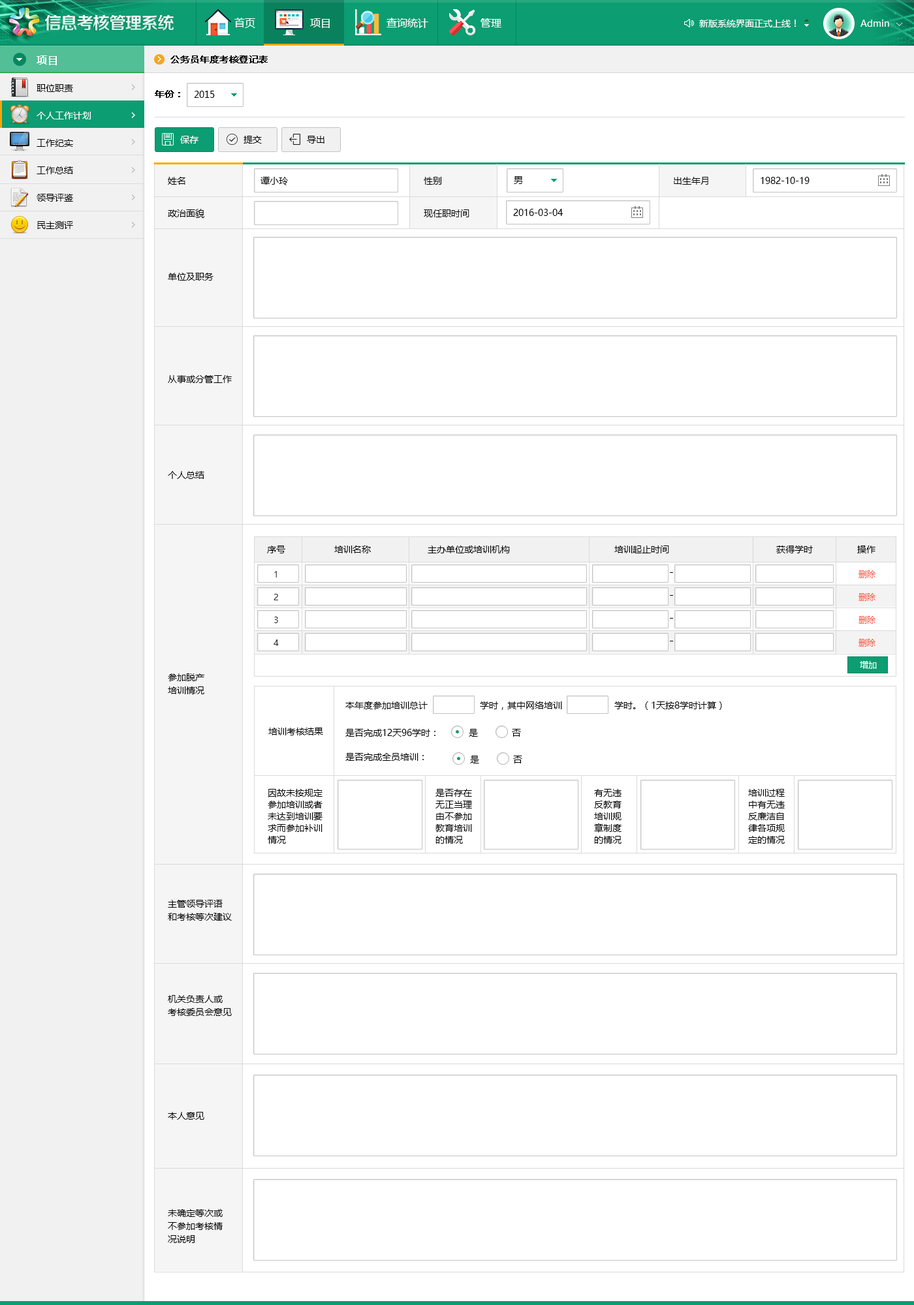
<style>
.page{position:relative;width:914px;height:1305px;background:#ffffff}
.page>*{position:absolute;margin:0}
.t1{font:9.1px "MicrosoftYaHei";color:#000000;font-weight:bold}
.t2{font:9.1px "MicrosoftYaHei";color:#000000}
.t3{font:9.1px "MicrosoftYaHei";color:#ffffff}
.t4{font:9.1px/32.6px "MicrosoftYaHei";color:#000000}
.t5{font:8.5px/22.8px "MicrosoftYaHei";color:#2c2c2c}
.t6{font:8.5px/22.8px "MicrosoftYaHei";color:#f9614d}
.t7{font:8.5px "MicrosoftYaHei";color:#ffffff}
.t8{font:9.1px/13.1px "MicrosoftYaHei";color:#000000}
.t9{font:9.1px/11.7px "MicrosoftYaHei";color:#000000}
</style>
<div class="page">
<p class="t1" style="left:170px;top:55px;width:98px;height:8px">公务员年度考核登记表</p>
<p class="t1" style="left:155px;top:90px;width:25px;height:8px">年份：</p>
<p class="t2" style="left:194px;top:91px;width:21px;height:7px">2015</p>
<p class="t3" style="left:180px;top:136px;width:18px;height:8px">保存</p>
<p class="t2" style="left:243px;top:136px;width:19px;height:8px">提交</p>
<p class="t2" style="left:307px;top:136px;width:17px;height:8px">导出</p>
<p class="t4" style="left:168px;top:177px;width:36px;height:41px">姓名<br>政治面貌</p>
<p class="t2" style="left:260px;top:177px;width:28px;height:8px">谭小玲</p>
<p class="t4" style="left:424px;top:177px;width:45px;height:40px">性别<br>现任职时间</p>
<p class="t2" style="left:514px;top:176px;width:8px;height:8px">男</p>
<p class="t2" style="left:673px;top:177px;width:35px;height:8px">出生年月</p>
<p class="t2" style="left:760px;top:177px;width:49px;height:7px">1982-10-19</p>
<p class="t2" style="left:513px;top:209px;width:50px;height:7px">2016-03-04</p>
<p class="t2" style="left:168px;top:273px;width:45px;height:8px">单位及职务</p>
<p class="t2" style="left:168px;top:375px;width:64px;height:8px">从事或分管工作</p>
<p class="t2" style="left:168px;top:471px;width:36px;height:8px">个人总结</p>
<p class="t2" style="left:267px;top:546px;width:18px;height:7px">序号</p>
<p class="t2" style="left:334px;top:546px;width:37px;height:7px">培训名称</p>
<p class="t2" style="left:427px;top:546px;width:83px;height:7px">主办单位或培训机构</p>
<p class="t2" style="left:614px;top:546px;width:55px;height:7px">培训起止时间</p>
<p class="t2" style="left:776px;top:546px;width:36px;height:7px">获得学时</p>
<p class="t2" style="left:857px;top:546px;width:18px;height:7px">操作</p>
<p class="t5" style="left:273px;top:571px;width:6px;height:75px;text-align:center">1<br>2<br>3<br>4</p>
<p class="t6" style="left:858px;top:570px;width:17px;height:77px;text-align:center">删除<br>删除<br>删除<br>删除</p>
<p class="t7" style="left:859px;top:661px;width:17px;height:8px">增加</p>
<p class="t8" style="left:168px;top:673px;width:36px;height:21px">参加脱产<br>培训情况</p>
<p class="t2" style="left:345px;top:702px;width:377px;height:8px">本年度参加培训总计                    学时，其中网络培训                    学时。（1天按8学时计算）</p>
<p class="t2" style="left:268px;top:728px;width:55px;height:7px">培训考核结果</p>
<p class="t2" style="left:345px;top:729px;width:90px;height:8px">是否完成12天96学时：</p>
<p class="t2" style="left:469px;top:729px;width:52px;height:8px">是             否</p>
<p class="t2" style="left:345px;top:753px;width:79px;height:8px">是否完成全员培训：</p>
<p class="t2" style="left:470px;top:756px;width:52px;height:8px">是             否</p>
<p class="t9" style="left:268px;top:789px;width:54px;height:55px">因故未按规定<br>参加培训或者<br>未达到培训要<br>求而参加补训<br>情况</p>
<p class="t9" style="left:435px;top:789px;width:37px;height:55px">是否存在<br>无正当理<br>由不参加<br>教育培训<br>的情况</p>
<p class="t9" style="left:594px;top:789px;width:27px;height:55px">有无违<br>反教育<br>培训规<br>章制度<br>的情况</p>
<p class="t9" style="left:748px;top:789px;width:36px;height:55px">培训过程<br>中有无违<br>反廉洁自<br>律各项规<br>定的情况</p>
<p class="t8" style="left:168px;top:900px;width:64px;height:21px">主管领导评语<br>和考核等次建议</p>
<p class="t8" style="left:168px;top:995px;width:64px;height:21px">机关负责人或<br>考核委员会意见</p>
<p class="t2" style="left:168px;top:1112px;width:36px;height:8px">本人意见</p>
<p class="t8" style="left:168px;top:1209px;width:55px;height:34px">未确定等次或<br>不参加考核情<br>况说明</p>
</div>
